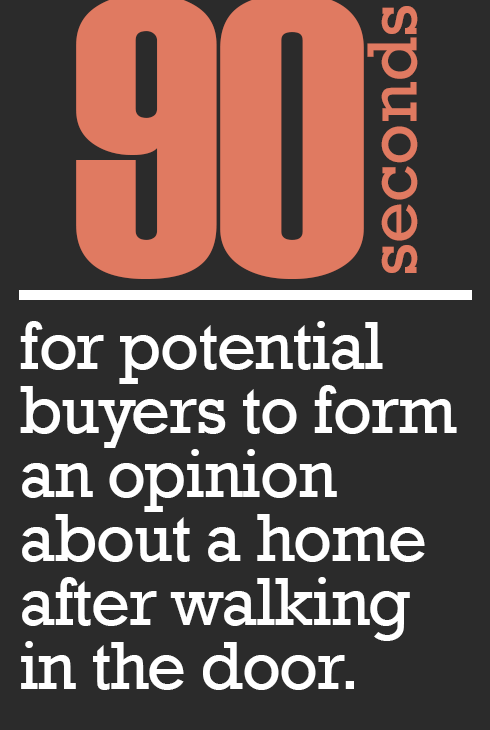
<style>
.page{position:relative;width:490px;height:730px;background:#2b2b2b}
.page>*{position:absolute;margin:0}
.t1{font:72px "Rockwell";color:#e07a61}
.t2{font:69px/64px "Rockwell";letter-spacing:-0.02em;color:#ffffff}
</style>
<div class="page">
<p class="t1" style="left:367px;top:6px;width:51px;height:267px;rotate:-90deg">seconds</p>
<p class="t2" style="left:20px;top:321px;width:437px;height:369px">for potential buyers to form an opinion about a home after walking in the door.</p>
</div>
